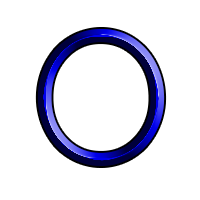
<style>
.page{position:relative;width:200px;height:200px;background:#ffffff}
.page>*{position:absolute;margin:0}
.t1{font:200px "CopperplateGothic-Light"}
</style>
<div class="page">
<p class="t1" style="left:37px;top:29px;width:128px;height:137px">0</p>
</div>
